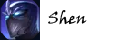
<style>
.page{position:relative;width:140px;height:40px;background:#ffffff}
.page>*{position:absolute;margin:0}
.t1{font:12px "VinerHandITC";color:#000000}
</style>
<div class="page">
<p class="t1" style="left:48px;top:10px;width:39px;height:15px">Shen</p>
</div>
